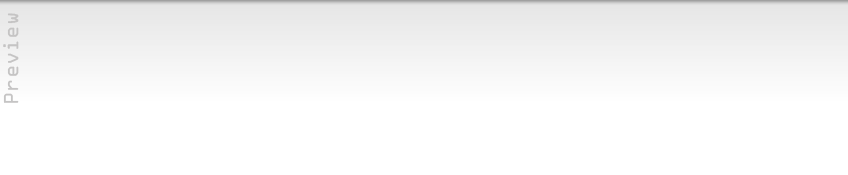
<style>
.page{position:relative;width:848px;height:175px;background:#ffffff}
.page>*{position:absolute;margin:0}
.t1{font:22px "OCRAExtended";color:#c5c4c4}
</style>
<div class="page">
<p class="t1" style="left:3px;top:13px;width:16px;height:90px;rotate:-90deg">Preview</p>
</div>
